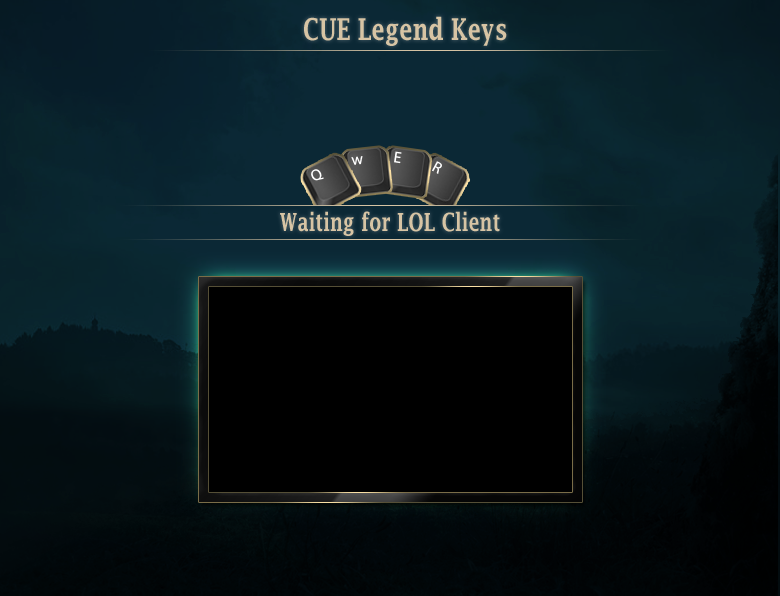
<style>
.page{position:relative;width:780px;height:596px}
.page>*{position:absolute;margin:0}
.t1{font:30px "LucidaFax-Demi";color:#d7c4a4;scale:0.75 1}
.t2{font:15.7px "MyriadPro-Regular";color:#ffffff}
.t3{font:25px "LucidaFax-Demi";color:#d7c4a4;scale:0.75 1}
</style>
<div class="page">
<p class="t1" style="left:304px;top:16px;width:203px;height:30px">CUE Legend Keys</p>
<p class="t2" style="left:351px;top:156px;width:12px;height:9px;rotate:-6deg">w</p>
<p class="t2" style="left:394px;top:151px;width:8px;height:13px;rotate:8deg">E</p>
<p class="t2" style="left:432px;top:161px;width:10px;height:13px;rotate:28deg">R</p>
<p class="t2" style="left:311px;top:169px;width:13px;height:12px;rotate:-28deg">Q</p>
<p class="t3" style="left:280px;top:211px;width:220px;height:25px">Waiting for LOL Client</p>
</div>
